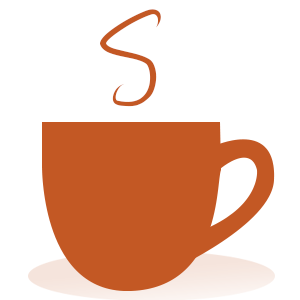
<style>
.page{position:relative;width:300px;height:300px;background:#ffffff}
.page>*{position:absolute;margin:0}
.t1{font:132.4px "AFE_Jen";color:#c35824}
</style>
<div class="page">
<p class="t1" style="left:100px;top:9px;width:61px;height:98px">S</p>
</div>
